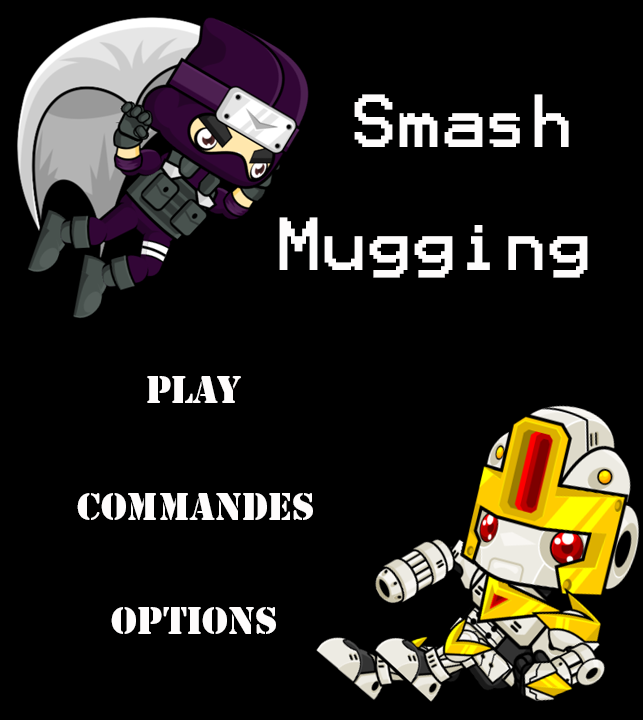
<style>
.page{position:relative;width:643px;height:720px;background:#000000}
.page>*{position:absolute;margin:0}
.t1{font:60px "Terminal";color:#fefcfc}
.t2{font:36px "StencilStd";color:#fefcfc}
</style>
<div class="page">
<p class="t1" style="left:354px;top:94px;width:215px;height:53px">Smash</p>
<p class="t1" style="left:279px;top:217px;width:309px;height:61px">Mugging</p>
<p class="t2" style="left:147px;top:376px;width:94px;height:27px">Play</p>
<p class="t2" style="left:77px;top:493px;width:236px;height:27px">Commandes</p>
<p class="t2" style="left:111px;top:607px;width:165px;height:27px">Options</p>
</div>
